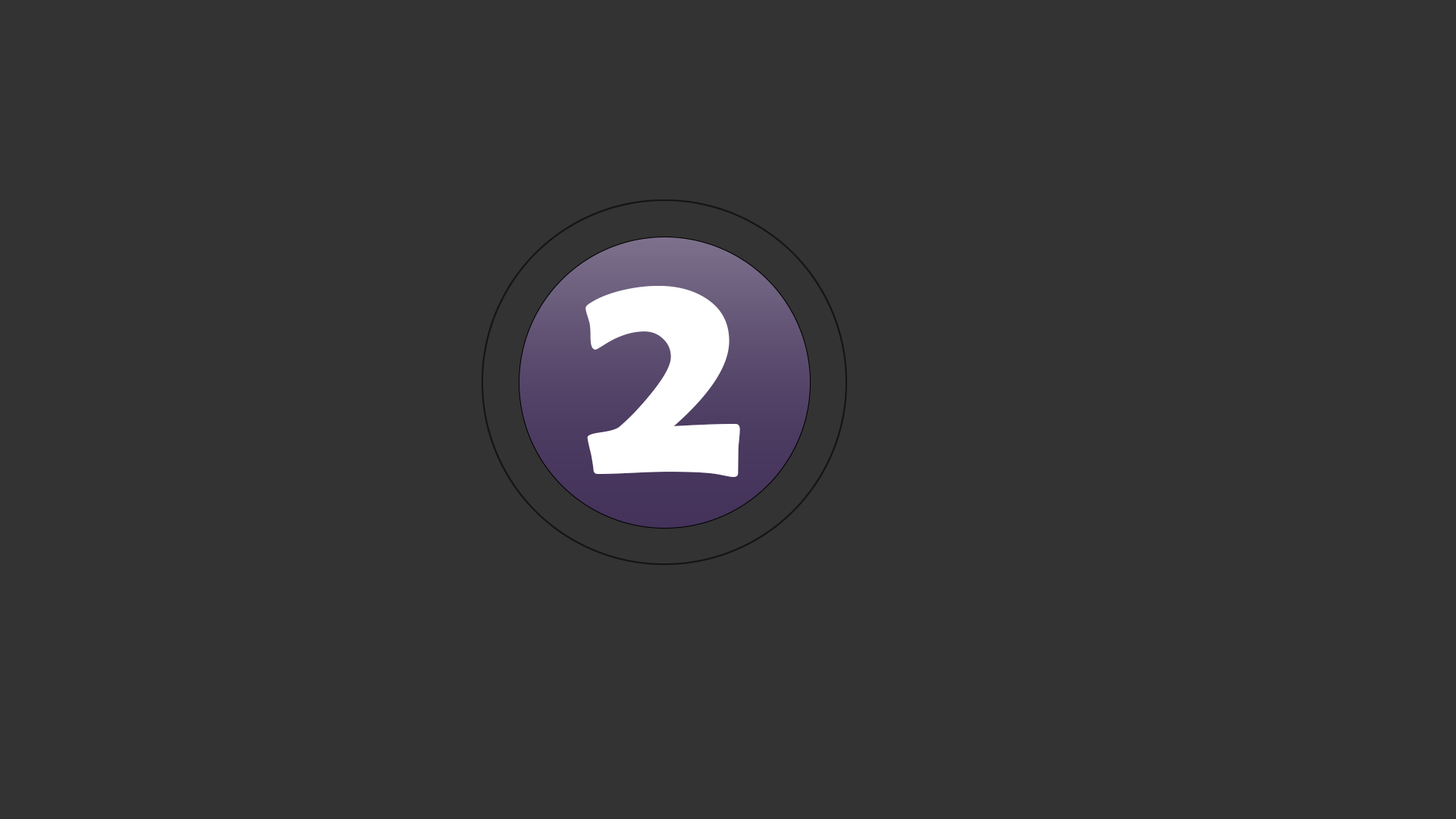
<style>
.page{position:relative;width:1456px;height:819px;background:#333333}
.page>*{position:absolute;margin:0}
.t1{font:309.2px "BerlinSansFBDemi-Bold";color:#ffffff}
</style>
<div class="page">
<p class="t1" style="left:585px;top:286px;width:155px;height:191px">2</p>
</div>
